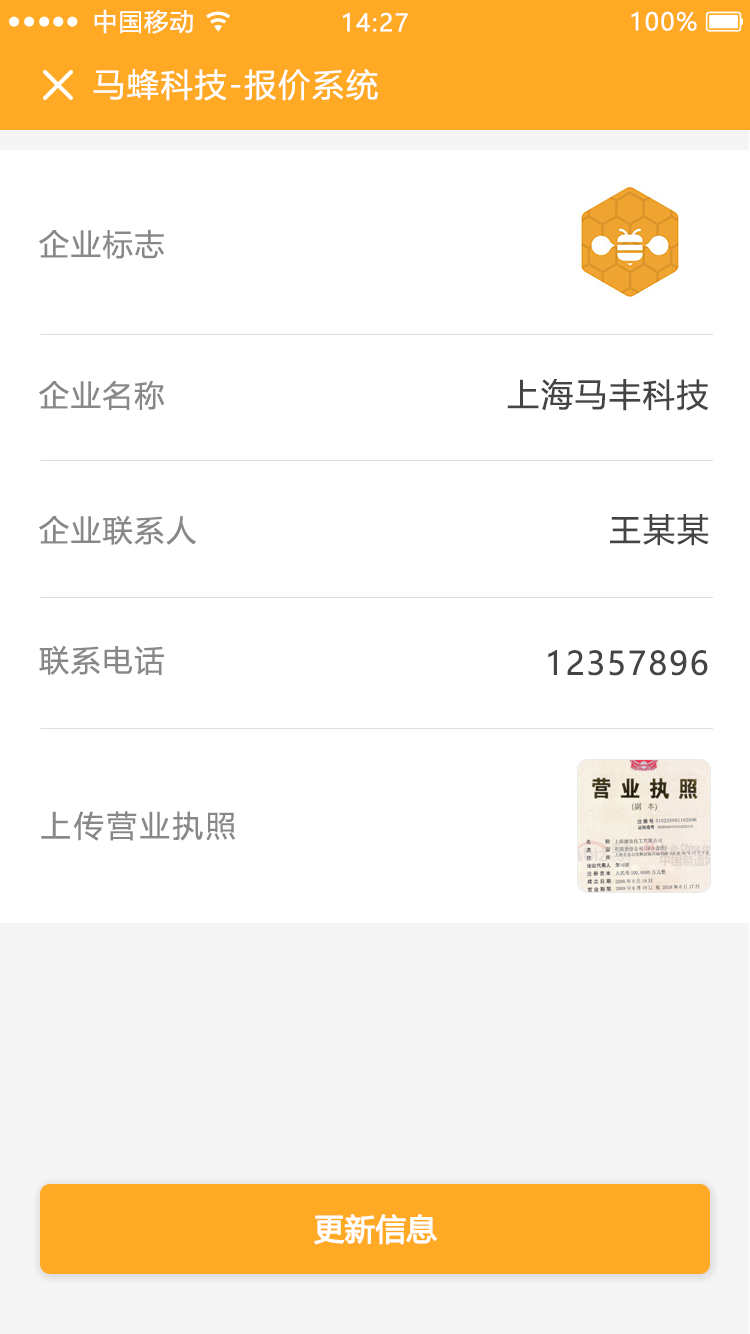
<style>
.page{position:relative;width:750px;height:1334px;background:#ffffff}
.page>*{position:absolute;margin:0}
.t1{font:24px "MicrosoftYaHeiUI";letter-spacing:0.06em;color:#ffffff}
.t2{font:32px "MicrosoftYaHeiUI";letter-spacing:0.06em;color:#ffffff}
.t3{font:30px "MicrosoftYaHeiUI";letter-spacing:0.06em;color:#888888}
.t4{font:32px "MicrosoftYaHeiUI";letter-spacing:0.06em;color:#444444}
.t5{font:30px "MicrosoftYaHeiUI";letter-spacing:0.1em;color:#888888}
.t6{font:30px "MicrosoftYaHeiUI";color:#ffffff;font-weight:bold}
</style>
<div class="page">
<p class="t1" style="left:94px;top:9px;width:99px;height:25px">中国移动</p>
<p class="t1" style="left:343px;top:12px;width:65px;height:20px">14:27</p>
<p class="t1" style="left:631px;top:11px;width:66px;height:20px">100%</p>
<p class="t2" style="left:93px;top:68px;width:285px;height:33px">马蜂科技-报价系统</p>
<p class="t3" style="left:39px;top:229px;width:125px;height:30px">企业标志</p>
<p class="t3" style="left:39px;top:380px;width:126px;height:30px">企业名称</p>
<p class="t4" style="left:507px;top:379px;width:202px;height:32px">上海马丰科技</p>
<p class="t3" style="left:39px;top:515px;width:157px;height:30px">企业联系人</p>
<p class="t4" style="left:610px;top:514px;width:99px;height:32px">王某某</p>
<p class="t3" style="left:39px;top:645px;width:125px;height:30px">联系电话</p>
<p class="t4" style="left:548px;top:650px;width:160px;height:26px">12357896</p>
<p class="t5" style="left:41px;top:811px;width:194px;height:30px">上传营业执照</p>
<p class="t6" style="left:314px;top:1214px;width:123px;height:31px">更新信息</p>
</div>
